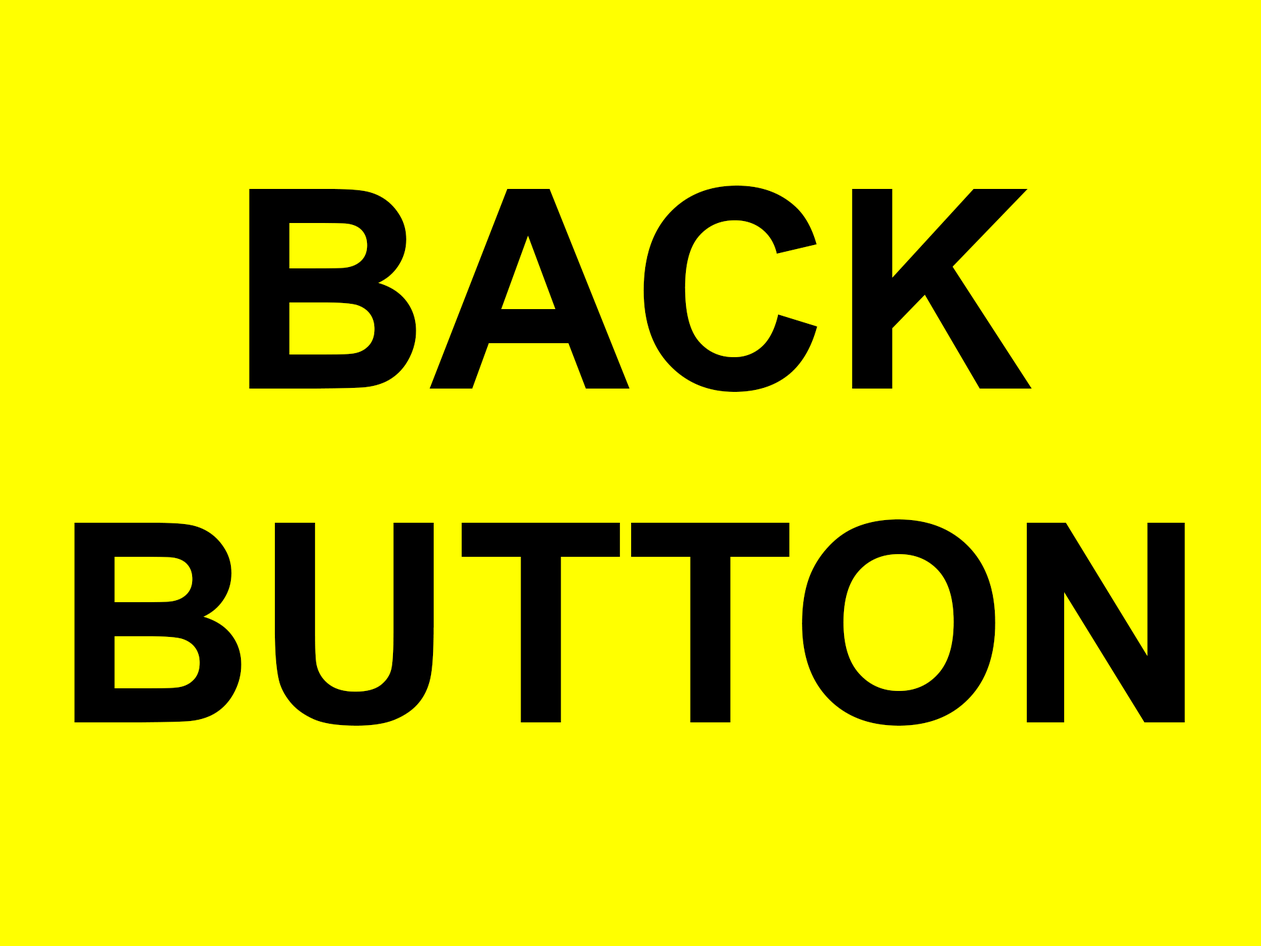
<style>
.page{position:relative;width:1261px;height:946px;background:#ffff00}
.page>*{position:absolute;margin:0}
.t1{font:278px "Arial-BoldMT";color:#000000}
</style>
<div class="page">
<p class="t1" style="left:74px;top:186px;width:1111px;height:539px;text-align:center">BACK BUTTON</p>
</div>
